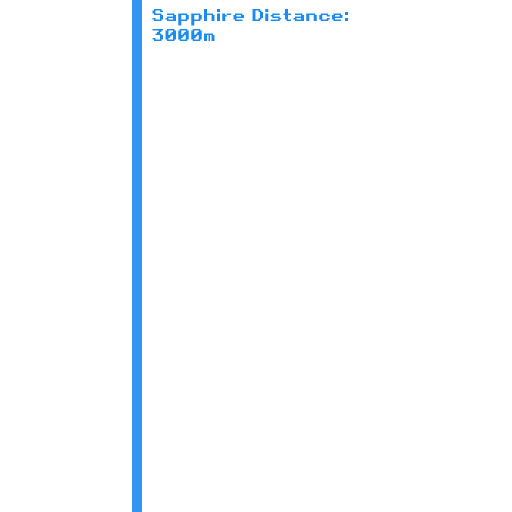
<style>
.page{position:relative;width:512px;height:512px;background:#ffffff}
.page>*{position:absolute;margin:0}
.t1{font:16.7px "RetroGaming";color:#1a8bef}
</style>
<div class="page">
<p class="t1" style="left:152px;top:9px;width:196px;height:32px">Sapphire Distance:<br>3000m</p>
</div>
